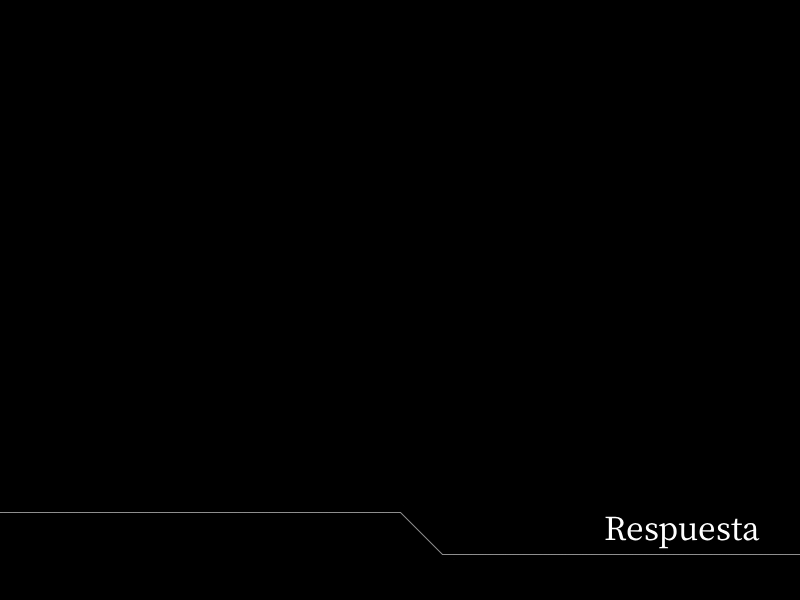
<style>
.page{position:relative;width:800px;height:600px;background:#000000}
.page>*{position:absolute;margin:0}
.t1{font:38px "OfficialFateFont-Medium";color:#ffffff}
</style>
<div class="page">
<p class="t1" style="left:605px;top:516px;width:155px;height:33px">Respuesta</p>
</div>
